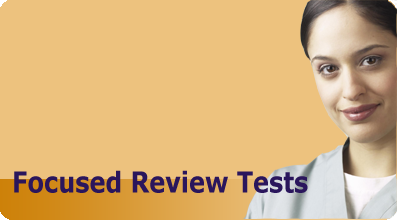
<style>
.page{position:relative;width:397px;height:220px;background:#edc27e}
.page>*{position:absolute;margin:0}
.t1{font:28.8px "Verdana-Bold";color:#2a165c;scale:0.83 1}
</style>
<div class="page">
<p class="t1" style="left:14px;top:170px;width:294px;height:23px">Focused Review Tests</p>
</div>
